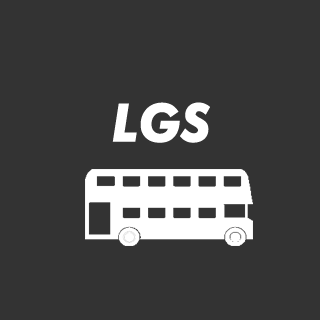
<style>
.page{position:relative;width:320px;height:320px;background:#333333}
.page>*{position:absolute;margin:0}
.t1{font:53.2px "FuturaBT-BoldItalic";color:#ffffff}
</style>
<div class="page">
<p class="t1" style="left:112px;top:102px;width:98px;height:41px">LGS</p>
</div>
